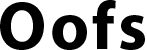
<style>
.page{position:relative;width:147px;height:50px;background:#ffffff}
.page>*{position:absolute;margin:0}
.t1{font:67.8px "MyriadPro-Bold";letter-spacing:0.05em;color:#000000}
</style>
<div class="page">
<p class="t1" style="left:0px;top:0px;width:145px;height:50px">Oofs</p>
</div>
